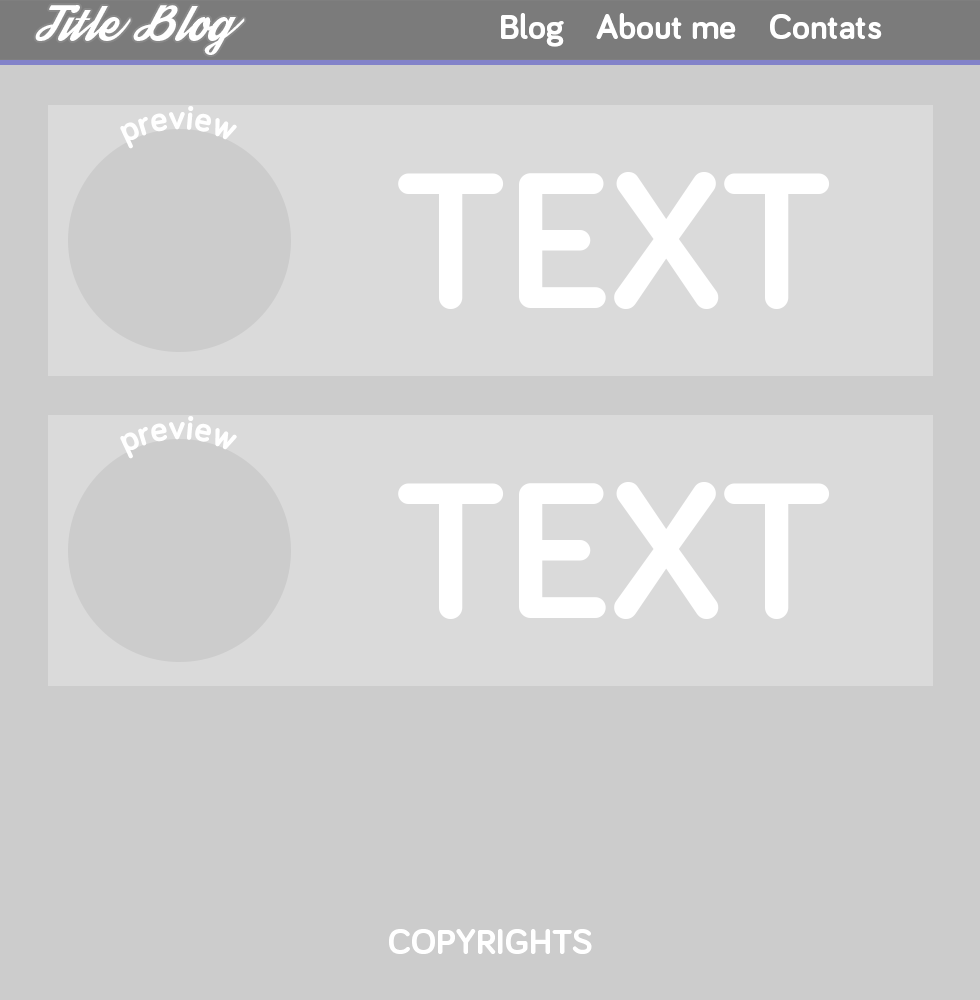
<style>
.page{position:relative;width:980px;height:1000px;background:#cccccc}
.page>*{position:absolute;margin:0}
.t1{font:36px "Streetwear";color:#ffffff}
.t2{font:36px "Bariol-Bold";color:#ffffff}
.t3{font:200px "Bariol-Bold";color:#ffffff}
</style>
<div class="page">
<p class="t1" style="left:35px;top:5px;width:210px;height:50px">Title Blog</p>
<p class="t2" style="left:501px;top:13px;width:381px;height:34px">Blog    About me    Contats</p>
<p class="t2" style="left:120px;top:106px;width:117px;height:43px;rotate:59deg">preview</p>
<p class="t3" style="left:398px;top:172px;width:432px;height:137px">TEXT</p>
<p class="t2" style="left:120px;top:416px;width:117px;height:43px;rotate:59deg">preview</p>
<p class="t3" style="left:398px;top:482px;width:432px;height:137px">TEXT</p>
<p class="t2" style="left:389px;top:929px;width:203px;height:25px">COPYRIGHTS</p>
</div>
